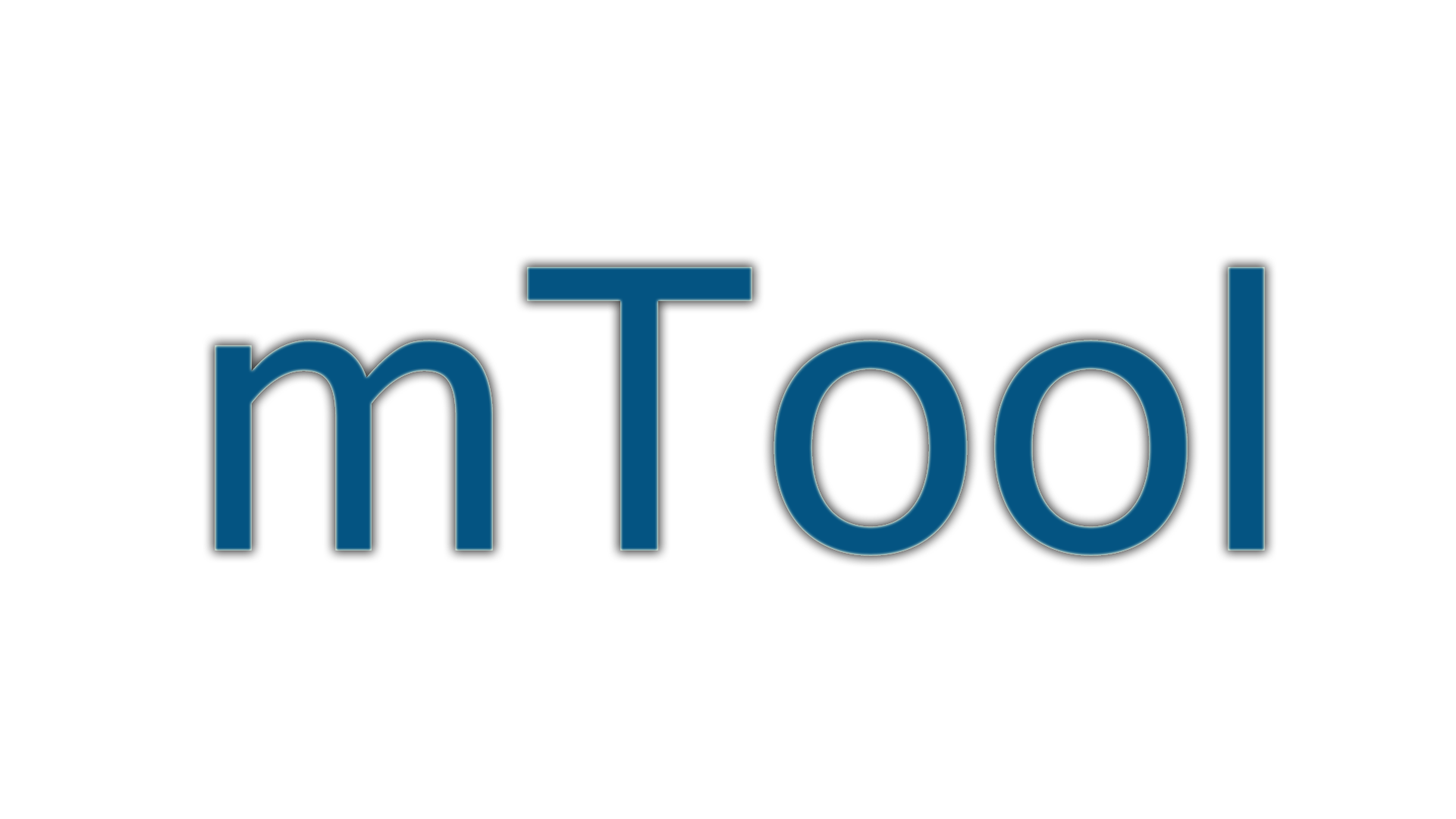
<style>
.page{position:relative;width:1456px;height:819px;background:#ffffff}
.page>*{position:absolute;margin:0}
.t1{font:439.8px "Latha";color:#045482}
</style>
<div class="page">
<p class="t1" style="left:215px;top:267px;width:1050px;height:289px">mTool</p>
</div>
